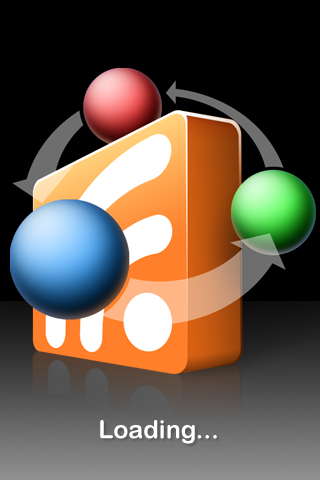
<style>
.page{position:relative;width:320px;height:480px;background:#000000}
.page>*{position:absolute;margin:0}
.t1{font:25px "ArialRoundedMTBold";color:#ffffff}
</style>
<div class="page">
<p class="t1" style="left:100px;top:420px;width:117px;height:24px">Loading...</p>
</div>
